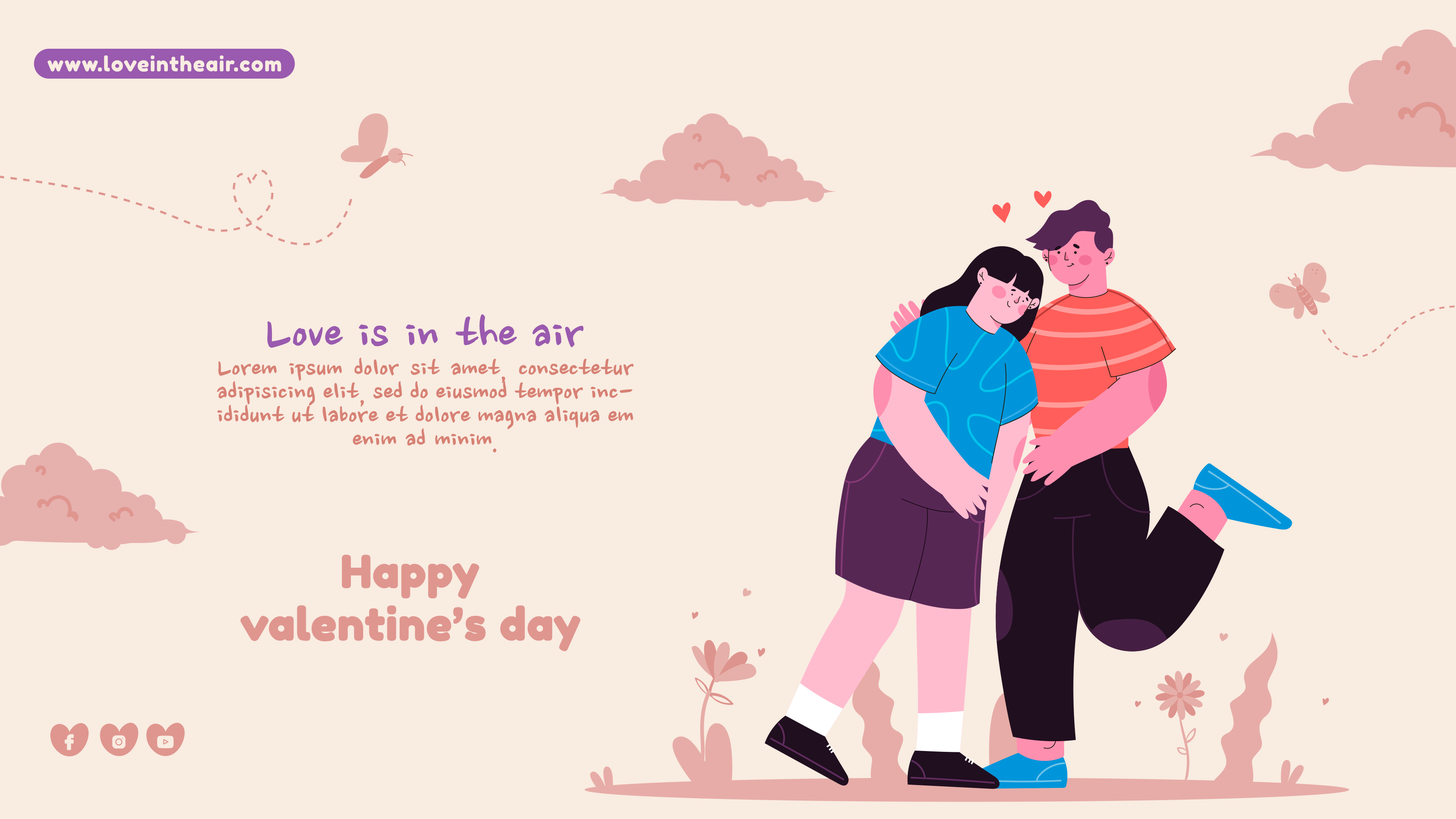
<style>
.page{position:relative;width:1456px;height:819px;background:#f9ece1}
.page>*{position:absolute;margin:0}
.t1{font:20.5px "FredokaOne-Regular";letter-spacing:0.05em;color:#f9ece1}
.t2{font:51.5px "NanumBrush";color:#9a5aaf;font-weight:bold}
.t3{font:28px/23.6px "NanumBrush";color:#d78174;font-weight:bold}
.t4{font:44.1px "FredokaOne-Regular";color:#df968f;font-weight:bold}
</style>
<div class="page">
<p class="t1" style="left:47px;top:55px;width:234px;height:17px">www.loveintheair.com</p>
<p class="t2" style="left:267px;top:314px;width:317px;height:34px">Love is in the air</p>
<p class="t3" style="left:217px;top:357px;width:417px;height:96px;text-align:justify">Lorem ipsum dolor sit amet, consectetur adipisicing elit, sed do eiusmod tempor incididunt ut labore et dolore magna aliqua em enim ad minim.</p>
<p class="t4" style="left:342px;top:554px;width:137px;height:45px">Happy</p>
<p class="t4" style="left:240px;top:605px;width:341px;height:46px">valentine’s day</p>
</div>
